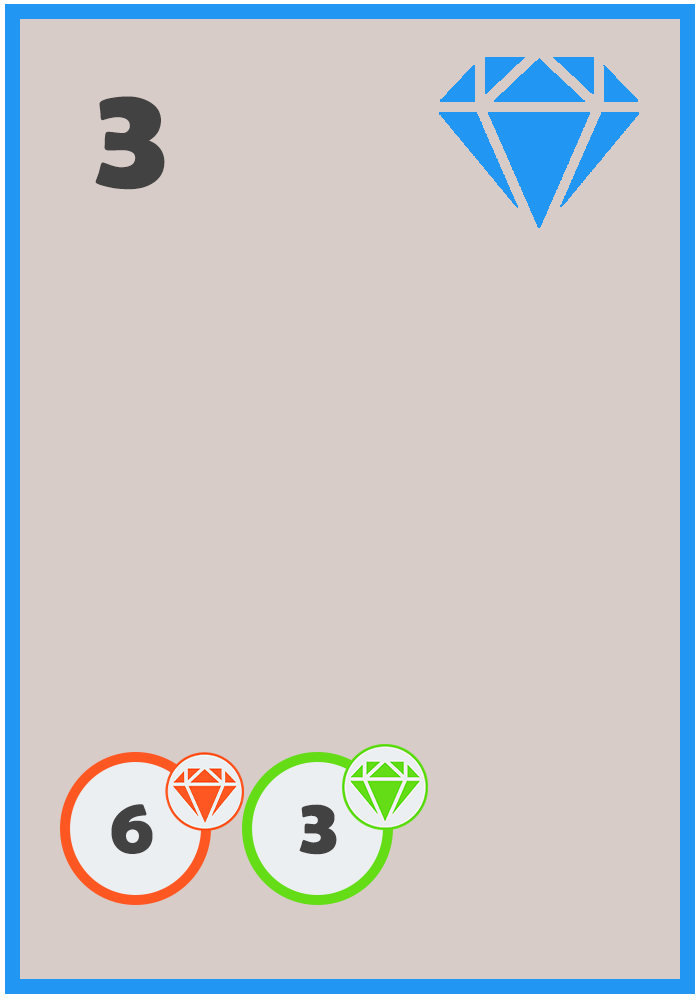
<style>
.page{position:relative;width:700px;height:1000px;background:#d7ccc8}
.page>*{position:absolute;margin:0}
.t1{font:150px "BerlinSansFBDemi-Bold";color:#424242}
.t2{font:80px "BerlinSansFBDemi-Bold";color:#424242}
</style>
<div class="page">
<p class="t1" style="left:95px;top:96px;width:70px;height:94px">3</p>
<p class="t2" style="left:111px;top:804px;width:42px;height:50px">6</p>
<p class="t2" style="left:299px;top:804px;width:38px;height:51px">3</p>
</div>
